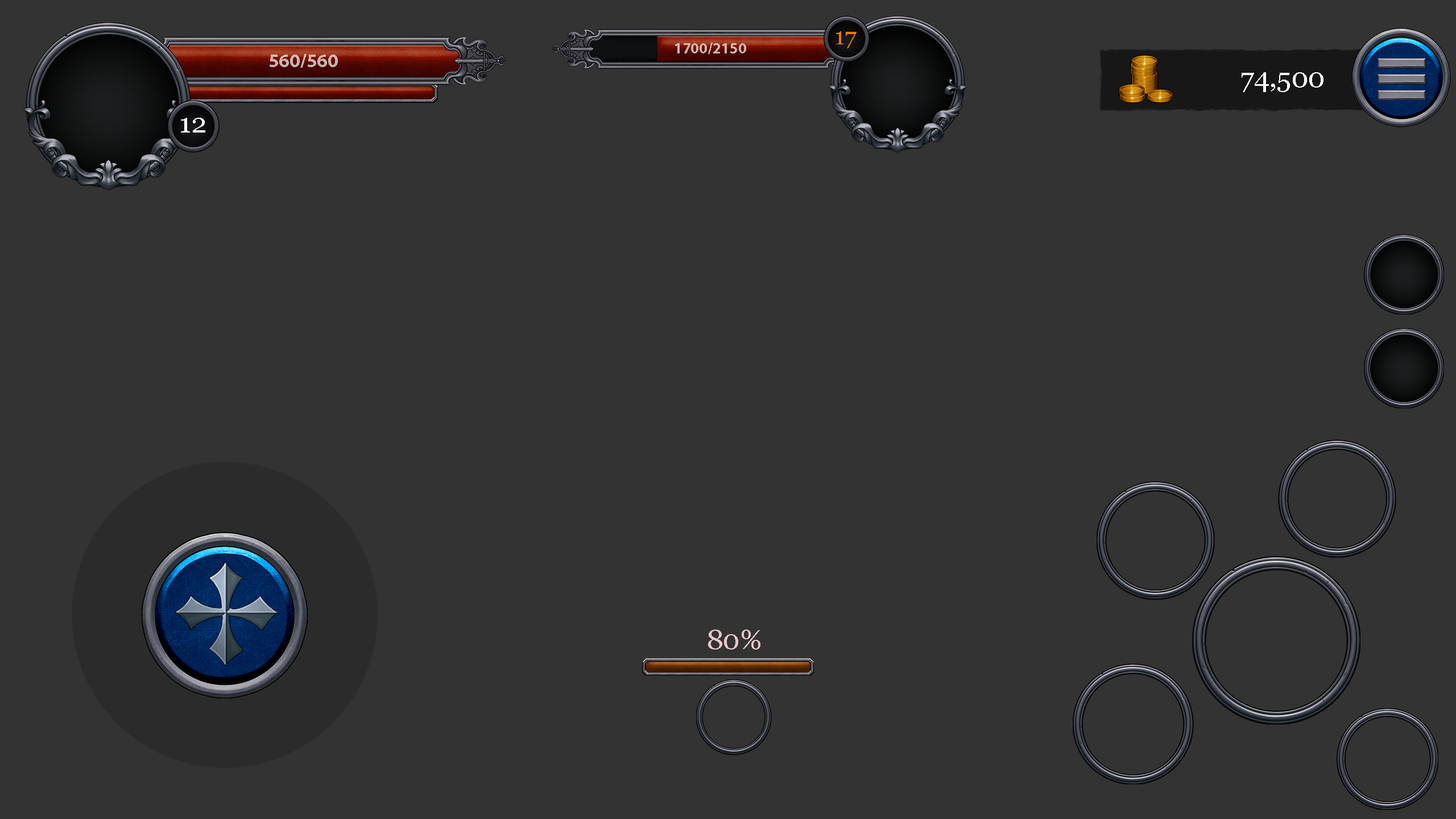
<style>
.page{position:relative;width:1456px;height:819px;background:#333333}
.page>*{position:absolute;margin:0}
.t1{font:24px "Georgia";color:#e87a03}
.t2{font:15.3px "MyriadPro-Bold";color:#c9b5b4}
.t3{font:19.2px "MyriadPro-Bold";color:#c8b5b4}
.t4{font:27.3px "Georgia";color:#ffffff}
.t5{font:27.3px "Georgia";color:#e6c8c8}
</style>
<div class="page">
<p class="t1" style="left:836px;top:31px;width:21px;height:17px">17</p>
<p class="t2" style="left:675px;top:43px;width:71px;height:11px">1700/2150</p>
<p class="t3" style="left:270px;top:54px;width:68px;height:14px">560/560</p>
<p class="t4" style="left:1242px;top:72px;width:81px;height:20px">74,500</p>
<p class="t4" style="left:181px;top:118px;width:24px;height:15px">12</p>
<p class="t5" style="left:708px;top:630px;width:52px;height:20px">80%</p>
</div>
